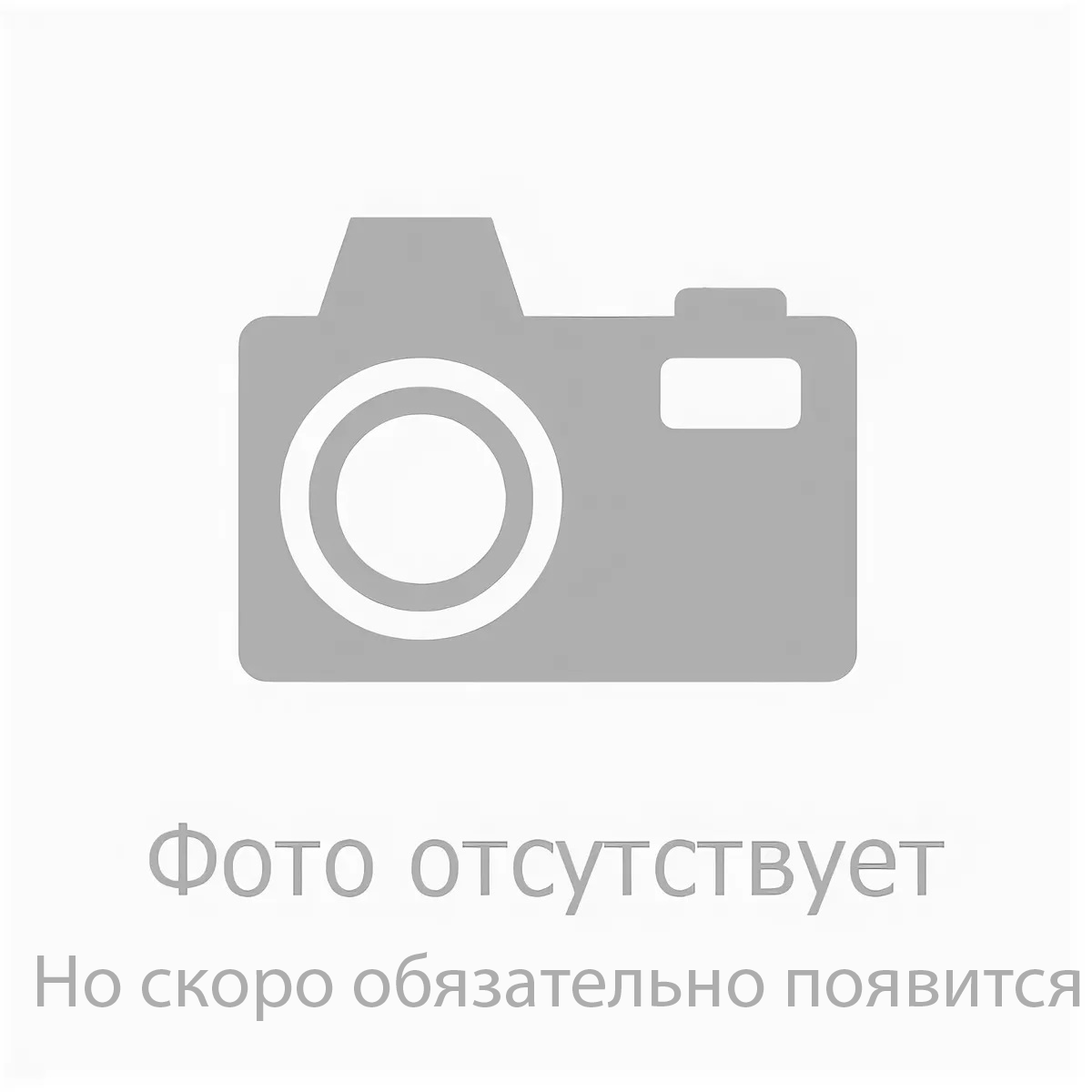
<style>
.page{position:relative;width:1092px;height:1092px;background:#fbfbfb}
.page>*{position:absolute;margin:0}
.t1{font:75.8px "MyriadPro-Regular";color:#adadad}
</style>
<div class="page">
<p class="t1" style="left:37px;top:952px;width:1043px;height:69px">Но скоро обязательно появится</p>
</div>
